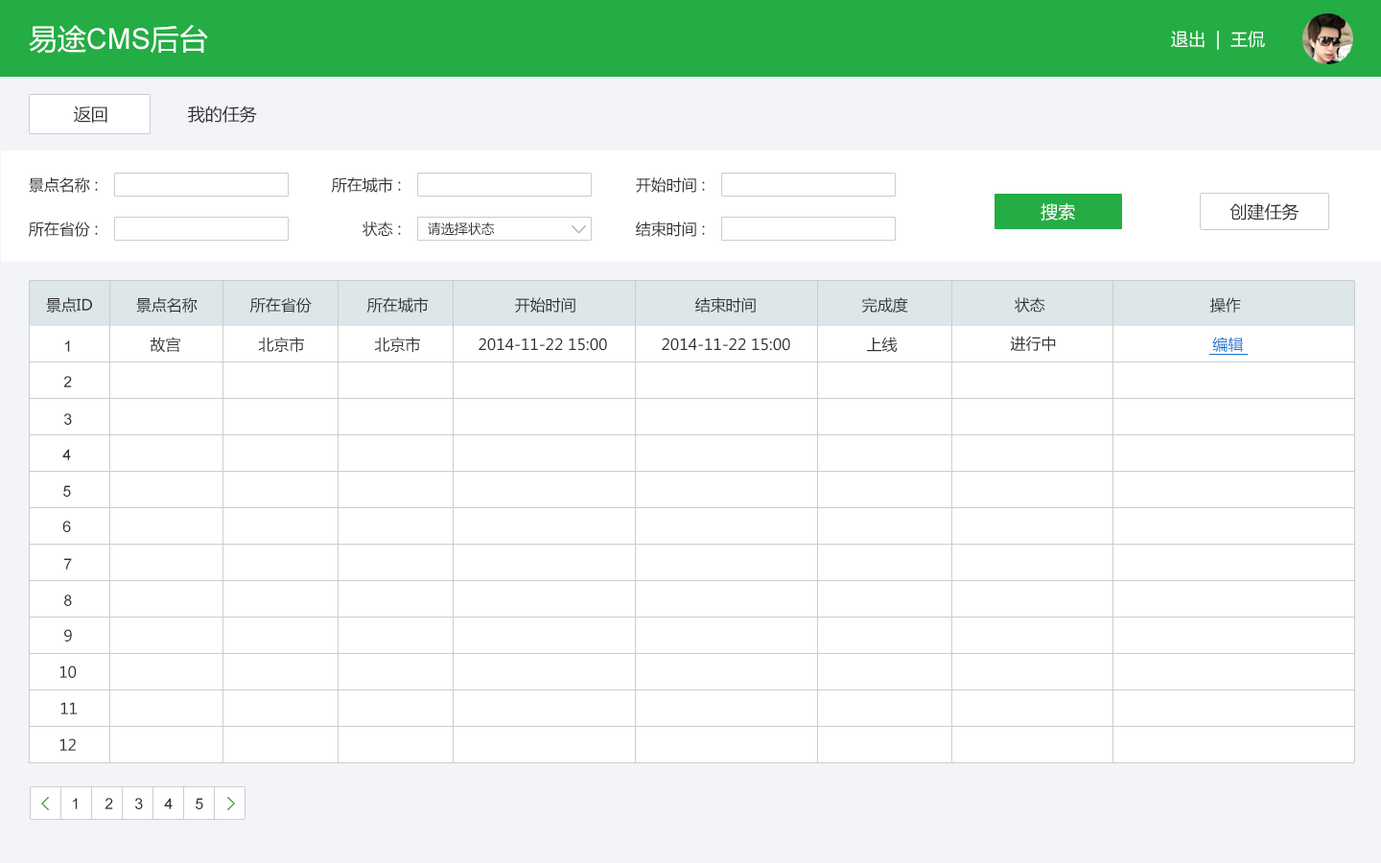
<style>
.page{position:relative;width:1381px;height:863px;background:#ffffff}
.page>*{position:absolute;margin:0}
.t1{font:28.8px "ArialMT";color:#ffffff}
.t2{font:28.8px "MicrosoftYaHei";color:#ffffff}
.t3{font:17.3px "MicrosoftYaHei";color:#ffffff}
.t4{font:17.3px "MicrosoftYaHei";color:#333333}
.t5{font:15.3px "MicrosoftYaHei";color:#333333}
.t6{font:13.4px "MicrosoftYaHei";color:#333333}
.t7{font:15.3px "ArialMT";color:#333333}
.t8{font:15.3px "MicrosoftYaHei";color:#1472cf}
</style>
<div class="page">
<p class="t1" style="left:29px;top:24px;width:179px;height:30px"><span class="t2">易途</span>CMS<span class="t2">后台</span></p>
<p class="t3" style="left:1171px;top:31px;width:94px;height:19px">退出  |  王侃</p>
<p class="t4" style="left:74px;top:106px;width:33px;height:17px">返回</p>
<p class="t4" style="left:188px;top:106px;width:69px;height:17px">我的任务</p>
<p class="t5" style="left:29px;top:177px;width:69px;height:16px">景点名称 :</p>
<p class="t5" style="left:331px;top:177px;width:70px;height:16px">所在城市 :</p>
<p class="t5" style="left:636px;top:177px;width:69px;height:16px">开始时间 :</p>
<p class="t3" style="left:1041px;top:203px;width:34px;height:18px">搜索</p>
<p class="t4" style="left:1230px;top:203px;width:70px;height:18px">创建任务</p>
<p class="t5" style="left:28px;top:222px;width:70px;height:15px">所在省份 :</p>
<p class="t5" style="left:363px;top:222px;width:38px;height:15px">状态 :</p>
<p class="t6" style="left:428px;top:222px;width:67px;height:14px">请选择状态</p>
<p class="t5" style="left:636px;top:222px;width:69px;height:15px">结束时间 :</p>
<p class="t5" style="left:46px;top:297px;width:46px;height:16px">景点ID</p>
<p class="t5" style="left:136px;top:297px;width:62px;height:16px">景点名称</p>
<p class="t5" style="left:249px;top:297px;width:63px;height:16px">所在省份</p>
<p class="t5" style="left:366px;top:297px;width:63px;height:16px">所在城市</p>
<p class="t5" style="left:515px;top:297px;width:61px;height:16px">开始时间</p>
<p class="t5" style="left:695px;top:297px;width:61px;height:16px">结束时间</p>
<p class="t5" style="left:862px;top:297px;width:46px;height:16px">完成度</p>
<p class="t5" style="left:1015px;top:297px;width:31px;height:16px">状态</p>
<p class="t5" style="left:1211px;top:297px;width:30px;height:16px">操作</p>
<p class="t7" style="left:65px;top:341px;width:5px;height:11px">1</p>
<p class="t5" style="left:150px;top:337px;width:30px;height:16px">故宫</p>
<p class="t5" style="left:258px;top:337px;width:46px;height:16px">北京市</p>
<p class="t5" style="left:374px;top:337px;width:46px;height:16px">北京市</p>
<p class="t5" style="left:479px;top:338px;width:128px;height:13px">2014-11-22 15:00</p>
<p class="t5" style="left:662px;top:338px;width:128px;height:13px">2014-11-22 15:00</p>
<p class="t5" style="left:867px;top:337px;width:31px;height:15px">上线</p>
<p class="t5" style="left:1010px;top:336px;width:46px;height:16px">进行中</p>
<p class="t8" style="left:1212px;top:337px;width:31px;height:15px">编辑</p>
<p class="t7" style="left:63px;top:376px;width:9px;height:12px">2</p>
<p class="t7" style="left:64px;top:413px;width:8px;height:12px">3</p>
<p class="t7" style="left:62px;top:449px;width:9px;height:11px">4</p>
<p class="t7" style="left:63px;top:485px;width:8px;height:12px">5</p>
<p class="t7" style="left:62px;top:521px;width:9px;height:11px">6</p>
<p class="t7" style="left:64px;top:558px;width:8px;height:12px">7</p>
<p class="t7" style="left:64px;top:595px;width:8px;height:11px">8</p>
<p class="t7" style="left:64px;top:629px;width:8px;height:13px">9</p>
<p class="t7" style="left:59px;top:666px;width:18px;height:12px">10</p>
<p class="t7" style="left:60px;top:702px;width:17px;height:13px">11</p>
<p class="t7" style="left:59px;top:739px;width:17px;height:12px">12</p>
<p class="t7" style="left:73px;top:798px;width:5px;height:12px">1</p>
<p class="t7" style="left:105px;top:798px;width:8px;height:12px">2</p>
<p class="t7" style="left:135px;top:798px;width:8px;height:12px">3</p>
<p class="t7" style="left:164px;top:798px;width:9px;height:12px">4</p>
<p class="t7" style="left:196px;top:798px;width:7px;height:12px">5</p>
</div>
